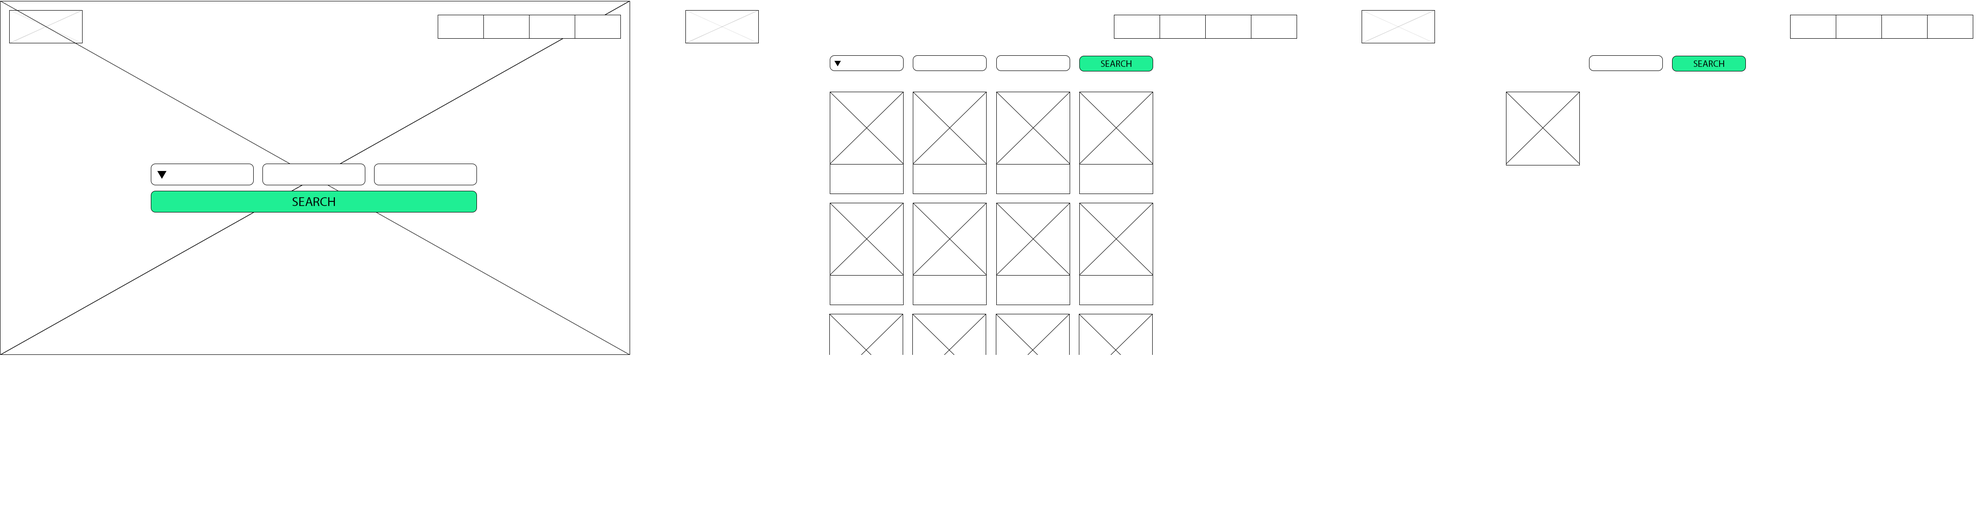
<style>
.page{position:relative;width:1988px;height:518px;background:#ffffff}
.page>*{position:absolute;margin:0}
.t1{font:9px "MyriadPro-Regular";color:#020000;scale:1.03 1}
.t2{font:12.5px "MyriadPro-Regular";color:#020000;scale:1.04 1}
</style>
<div class="page">
<p class="t1" style="left:1101px;top:60px;width:30px;height:7px">SEARCH</p>
<p class="t1" style="left:1693px;top:60px;width:31px;height:7px">SEARCH</p>
<p class="t2" style="left:292px;top:197px;width:43px;height:9px">SEARCH</p>
</div>
